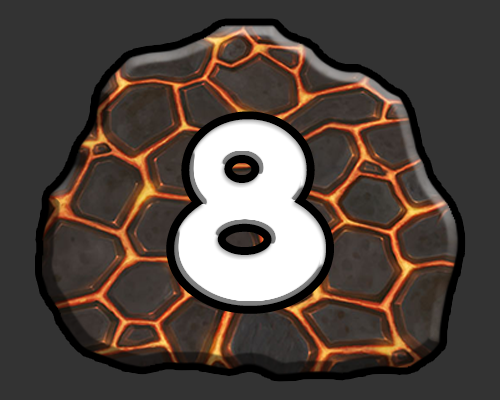
<style>
.page{position:relative;width:500px;height:400px;background:#333333}
.page>*{position:absolute;margin:0}
.t1{font:274.5px "Funhouse";color:#ffffff}
</style>
<div class="page">
<p class="t1" style="left:174px;top:119px;width:152px;height:187px">8</p>
</div>
